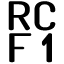
<style>
.page{position:relative;width:64px;height:64px;background:#ffffff}
.page>*{position:absolute;margin:0}
.t1{font:39.4px "Dosis-SemiBold";color:#000000;scale:1.17 1}
.t2{font:39.4px "Dosis-SemiBold";color:#000000;scale:1.3 1}
</style>
<div class="page">
<p class="t1" style="left:8px;top:1px;width:48px;height:30px">RC</p>
<p class="t2" style="left:9px;top:33px;width:43px;height:30px">F 1</p>
</div>
